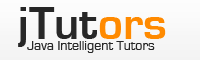
<style>
.page{position:relative;width:200px;height:60px}
.page>*{position:absolute;margin:0}
.t1{font:48px "EurostileBold";color:#272727}
.t2{font:48px "EurostileBold";color:#ff8a00}
.t3{font:14px "EurostileRegular";color:#272727}
</style>
<div class="page">
<p class="t1" style="left:18px;top:7px;width:148px;height:40px">jTut<span class="t2">ors</span></p>
<p class="t3" style="left:27px;top:41px;width:128px;height:12px">Java Intelligent Tutors</p>
</div>
